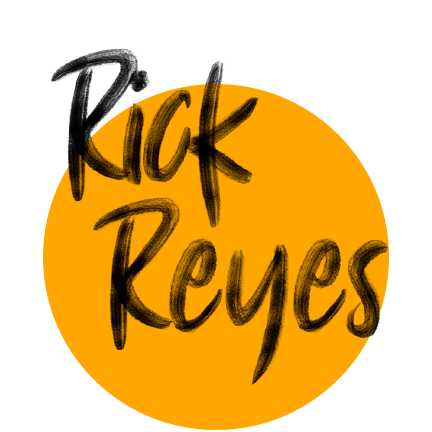
<style>
.page{position:relative;width:432px;height:432px;background:#ffffff}
.page>*{position:absolute;margin:0}
.t1{font:241px "MacbethReguler";color:#040300}
.t2{font:241px "MacbethReguler";color:#080300}
</style>
<div class="page">
<p class="t1" style="left:51px;top:48px;width:209px;height:180px">Rick</p>
<p class="t2" style="left:93px;top:196px;width:295px;height:189px">Reyes</p>
</div>
